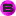
<style>
.page{position:relative;width:16px;height:16px}
.page>*{position:absolute;margin:0}
.t1{font:12px "Cornerstone";letter-spacing:0.32em;color:#272727;scale:1.18 1}
</style>
<div class="page">
<p class="t1" style="left:3px;top:4px;width:11px;height:8px">B</p>
</div>
